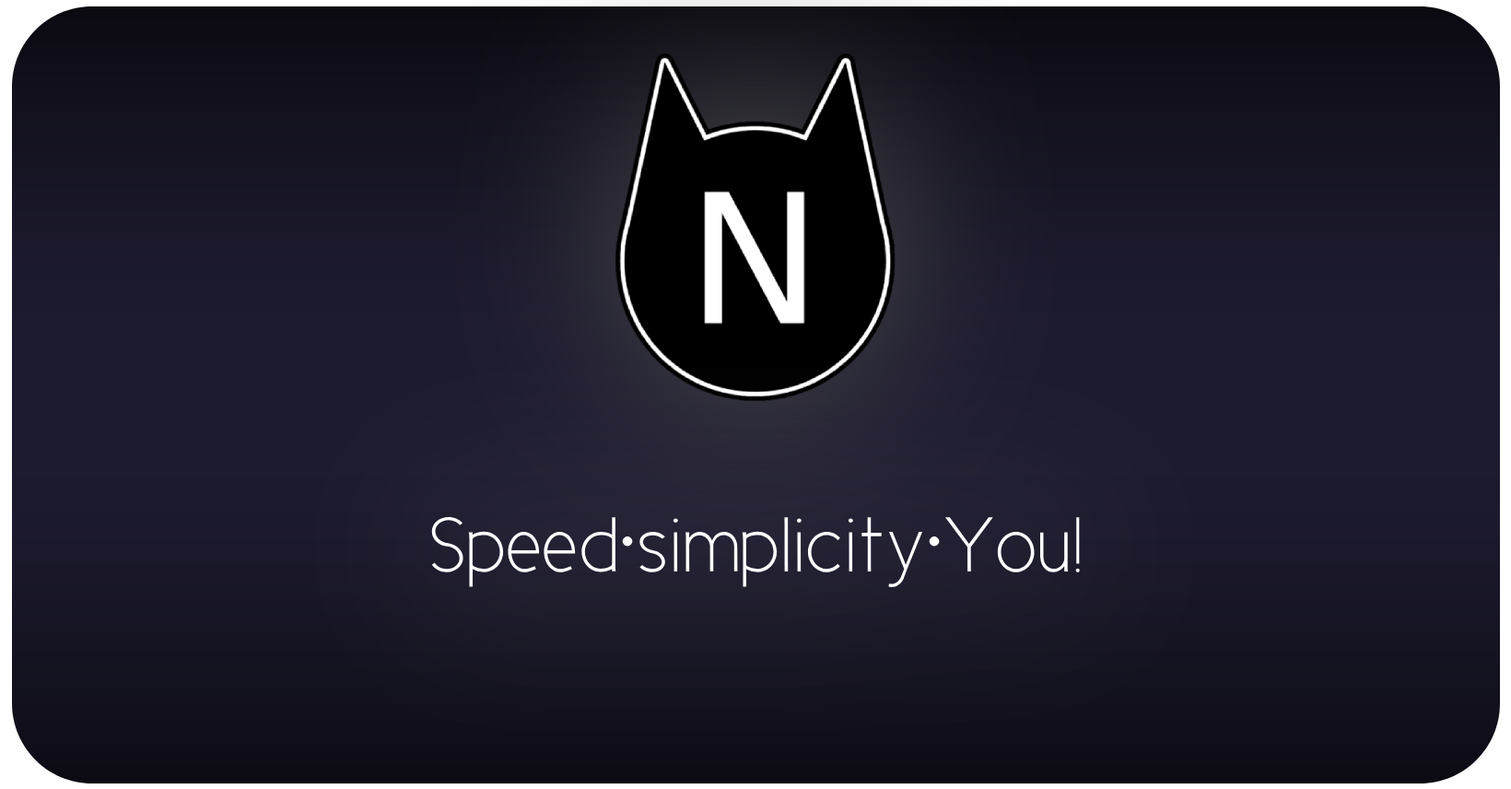
<style>
.page{position:relative;width:1511px;height:789px}
.page>*{position:absolute;margin:0}
.t1{font:78.3px "CicleFina";color:#ffffff}
</style>
<div class="page">
<p class="t1" style="left:431px;top:517px;width:649px;height:70px">Speed•simplicity•You!</p>
</div>
